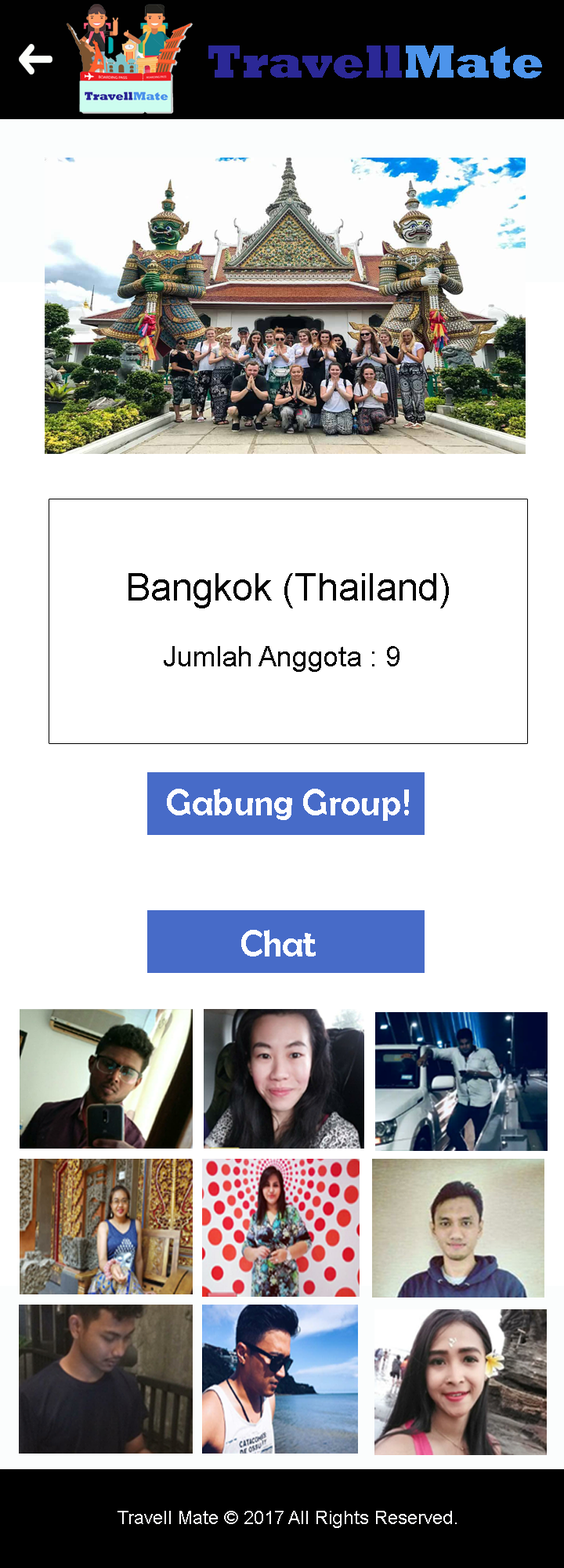
<style>
.page{position:relative;width:564px;height:1568px;background:#ffffff}
.page>*{position:absolute;margin:0}
.t1{font:47px "Rockwell-ExtraBold";color:#2b2896}
.t2{font:47px "Rockwell-ExtraBold";color:#4d94eb}
.t3{font:37.6px "ArialMT";color:#050505}
.t4{font:28.2px "ArialMT";color:#050505}
.t5{font:37.6px "BerlinSansFB-Reg";color:#fdfdfe}
.t6{font:18.8px "ArialMT";color:#fdfdfe}
</style>
<div class="page">
<p class="t1" style="left:209px;top:45px;width:334px;height:33px">Travell<span class="t2">Mate</span></p>
<p class="t3" style="left:129px;top:573px;width:320px;height:35px">Bangkok (Thailand)</p>
<p class="t4" style="left:164px;top:646px;width:236px;height:26px">Jumlah Anggota : 9</p>
<p class="t5" style="left:167px;top:789px;width:242px;height:32px">Gabung Group!</p>
<p class="t5" style="left:241px;top:930px;width:75px;height:26px">Chat</p>
<p class="t6" style="left:118px;top:1511px;width:339px;height:17px">Travell Mate © 2017 All Rights Reserved.</p>
</div>
